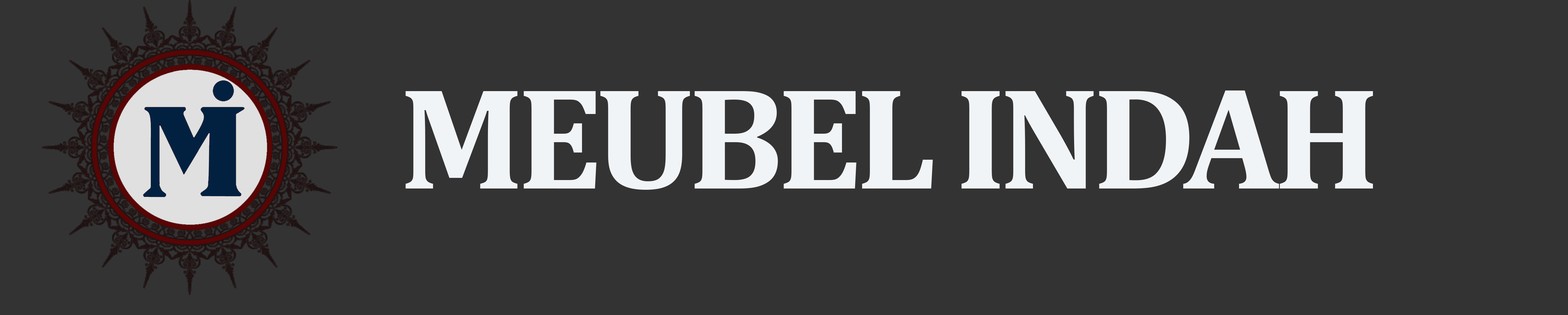
<style>
.page{position:relative;width:1568px;height:315px;background:#333333}
.page>*{position:absolute;margin:0}
.t1{font:146.5px "Cambria-Bold";letter-spacing:-0.05em;color:#f1f4f7}
</style>
<div class="page">
<p class="t1" style="left:405px;top:91px;width:968px;height:99px">MEUBEL INDAH</p>
</div>
